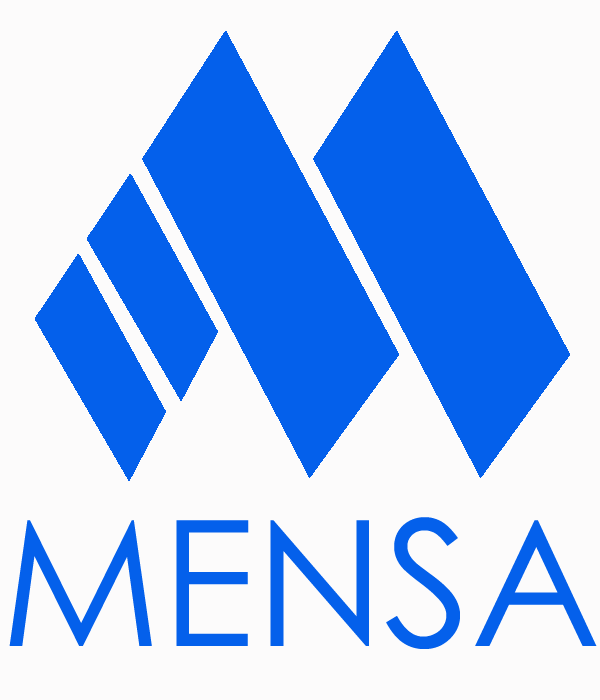
<style>
.page{position:relative;width:600px;height:700px;background:#fcfbfb}
.page>*{position:absolute;margin:0}
.t1{font:175px "CenturyGothic";color:#0460eb}
</style>
<div class="page">
<p class="t1" style="left:9px;top:517px;width:588px;height:132px">MENSA</p>
</div>
